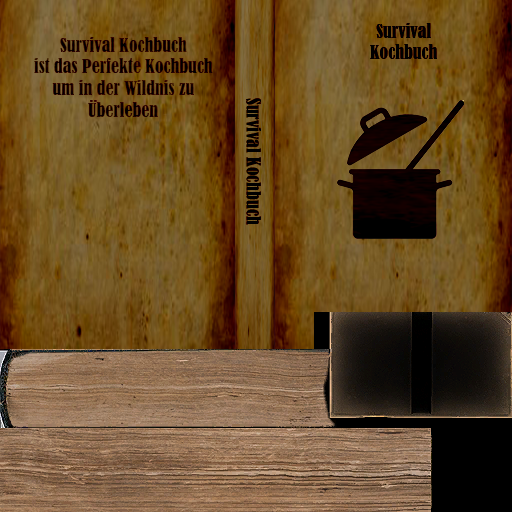
<style>
.page{position:relative;width:512px;height:512px}
.page>*{position:absolute;margin:0}
.t1{font:18px "BernardMT-Condensed";color:#000000}
.t2{font:18px "BernardMT-Condensed";color:#130000}
</style>
<div class="page">
<p class="t1" style="left:370px;top:23px;width:67px;height:36px;text-align:center">Survival<br>Kochbuch</p>
<p class="t2" style="left:34px;top:37px;width:179px;height:80px;text-align:center">Survival Kochbuch<br>ist das Perfekte Kochbuch<br>um in der Wildnis zu <br>Überleben</p>
<p class="t1" style="left:246px;top:98px;width:15px;height:127px;rotate:90deg">Survival Kochbuch</p>
</div>
